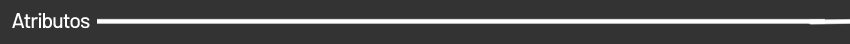
<style>
.page{position:relative;width:850px;height:44px;background:#333333}
.page>*{position:absolute;margin:0}
.t1{font:21.3px "Barlow-Medium";letter-spacing:-0.05em;color:#ffffff}
</style>
<div class="page">
<p class="t1" style="left:12px;top:12px;width:78px;height:17px">Atributos</p>
</div>
